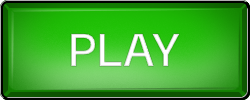
<style>
.page{position:relative;width:250px;height:100px}
.page>*{position:absolute;margin:0}
.t1{font:57px "DarkerGrotesque-SemiBold";color:#ffffff}
</style>
<div class="page">
<p class="t1" style="left:71px;top:33px;width:109px;height:33px">PLAY</p>
</div>
